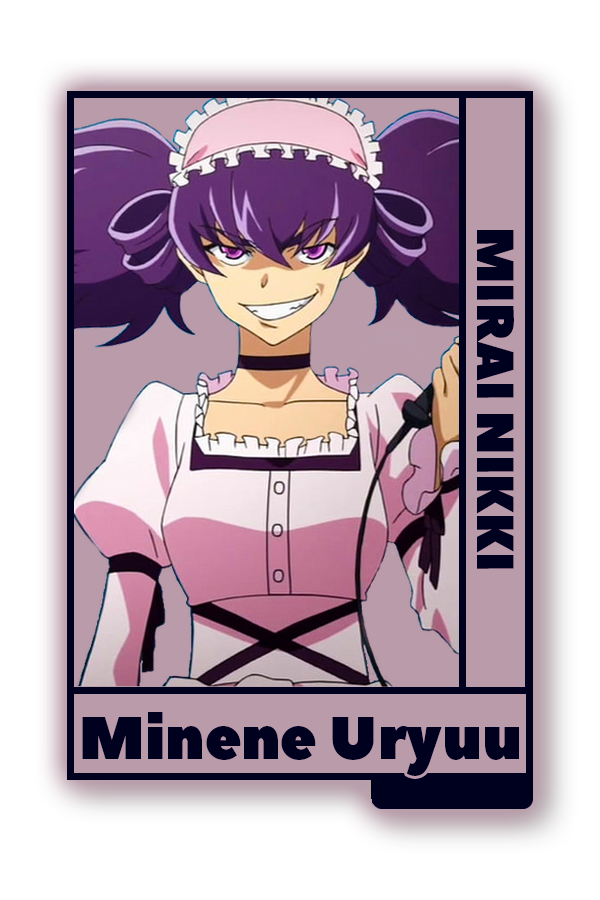
<style>
.page{position:relative;width:600px;height:900px;background:#ffffff}
.page>*{position:absolute;margin:0}
.t1{font:52px "PeaceSans";color:#00001b}
.t2{font:60.3px "PeaceSans";color:#00001b}
</style>
<div class="page">
<p class="t1" style="left:477px;top:230px;width:37px;height:339px;rotate:90deg">MIRAI NIKKI</p>
<p class="t2" style="left:82px;top:712px;width:437px;height:64px">Minene Uryuu</p>
</div>
